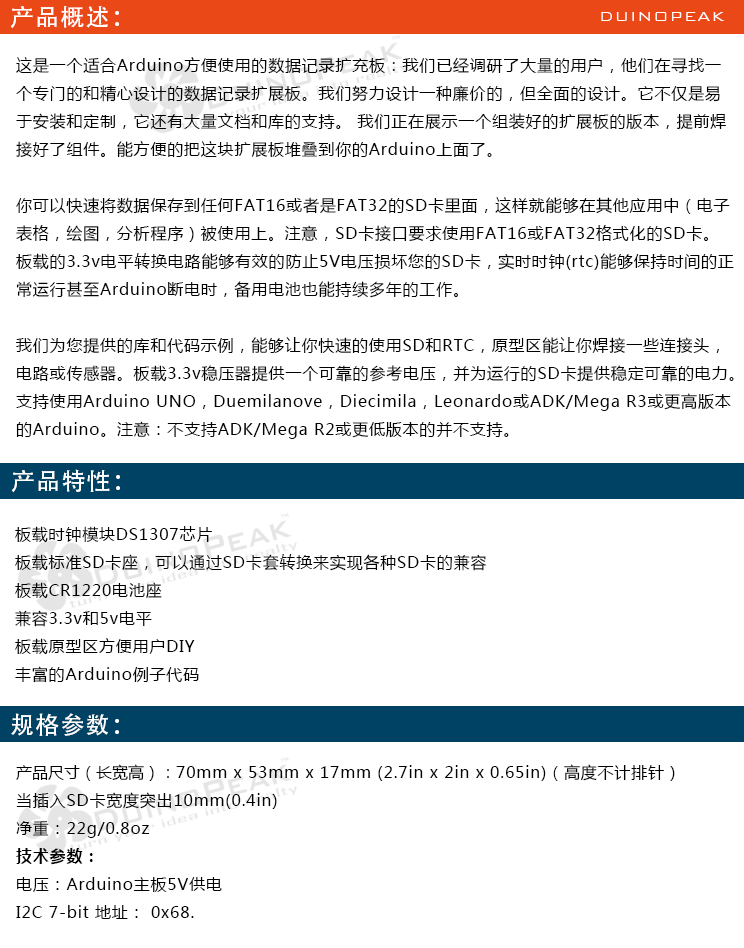
<style>
.page{position:relative;width:744px;height:948px;background:#ffffff}
.page>*{position:absolute;margin:0}
.t1{font:24px "AdobeHeitiStd-Regular";letter-spacing:0.05em;color:#ffffff}
.t2{font:18px "BankGothicBT-Light";letter-spacing:0.05em;color:#ffffff}
.t3{font:16px "MicrosoftYaHei";letter-spacing:0.05em;color:#000000}
.t4{font:16px "MicrosoftYaHei";color:#000000}
.t5{font:16px "MicrosoftYaHei-Bold";letter-spacing:0.05em;color:#000000}
</style>
<div class="page">
<p class="t1" style="left:10px;top:6px;width:109px;height:23px">产品概述：</p>
<p class="t2" style="left:601px;top:12px;width:124px;height:9px">DUINOPEAK</p>
<p class="t3" style="left:16px;top:57px;width:718px;height:382px">这是一个适合Arduino方便使用的数据记录扩充板：我们已经调研了大量的用户，他们在寻找一<br>个专门的和精心设计的数据记录扩展板。我们努力设计一种廉价的，但全面的设计。它不仅是易<br>于安装和定制，它还有大量文档和库的支持。 我们正在展示一个组装好的扩展板的版本，提前焊<br>接好了组件。能方便的把这块扩展板堆叠到你的Arduino上面了。<br><br>你可以快速将数据保存到任何FAT16或者是FAT32的SD卡里面，这样就能够在其他应用中（电子<br>表格，绘图，分析程序）被使用上。注意，SD卡接口要求使用FAT16或FAT32格式化的SD卡。<br>板载的3.3v电平转换电路能够有效的防止5V电压损坏您的SD卡，实时时钟(rtc)能够保持时间的正<br>常运行甚至Arduino断电时，备用电池也能持续多年的工作。<br><br>我们为您提供的库和代码示例，能够让你快速的使用SD和RTC，原型区能让你焊接一些连接头，<br>电路或传感器。板载3.3v稳压器提供一个可靠的参考电压，并为运行的SD卡提供稳定可靠的电力。<br>支持使用Arduino UNO，Duemilanove，Diecimila，Leonardo或ADK/Mega R3或更高版本<br>的Arduino。注意：不支持ADK/Mega R2或更低版本的并不支持。</p>
<p class="t1" style="left:11px;top:469px;width:109px;height:24px">产品特性：</p>
<p class="t3" style="left:15px;top:526px;width:472px;height:157px">板载时钟模块DS1307芯片<br>板载标准SD卡座，可以通过SD卡套转换来实现各种SD卡的兼容<br>板载CR1220电池座<br>兼容3.3v和5v电平<br>板载原型区方便用户DIY<br>丰富的Arduino例子代码</p>
<p class="t1" style="left:11px;top:713px;width:108px;height:23px">规格参数：</p>
<p class="t3" style="left:16px;top:764px;width:659px;height:155px"><span class="t4">产品尺寸（长宽高）：</span>70mm x 53mm x 17mm (2.7in x 2in x 0.65in)（高度不计排针）<br>当插入SD卡宽度突出10mm(0.4in) <br>净重：22g/0.8oz<br><span class="t5">技术参数：<br></span>电压：Arduino主板5V供电<br>I2C 7-bit 地址： 0x68.</p>
</div>
